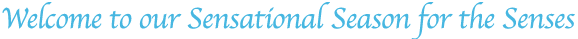
<style>
.page{position:relative;width:578px;height:39px;background:#ffffff}
.page>*{position:absolute;margin:0}
.t1{font:30px "Apple-Chancery";letter-spacing:-0.02em;color:#47b7e1}
</style>
<div class="page">
<p class="t1" style="left:2px;top:2px;width:573px;height:39px">Welcome to our Sensational Season for the Senses</p>
</div>
